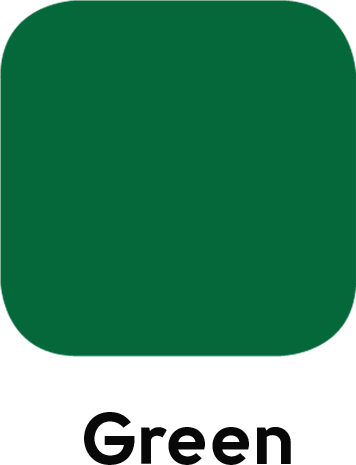
<style>
.page{position:relative;width:356px;height:465px;background:#04683b}
.page>*{position:absolute;margin:0}
.t1{font:72px "Solomon-Sans-Bold";color:#080808}
</style>
<div class="page">
<p class="t1" style="left:84px;top:412px;width:207px;height:53px">Green</p>
</div>
